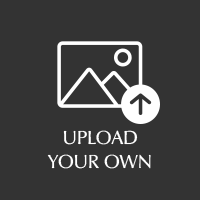
<style>
.page{position:relative;width:200px;height:200px;background:#333333}
.page>*{position:absolute;margin:0}
.t1{font:19.4px "Epigrafica-SmallCaps";color:#ffffff;text-transform:uppercase}
</style>
<div class="page">
<p class="t1" style="left:47px;top:130px;width:104px;height:39px;text-align:center">UPLOAD YOUR OWN</p>
</div>
